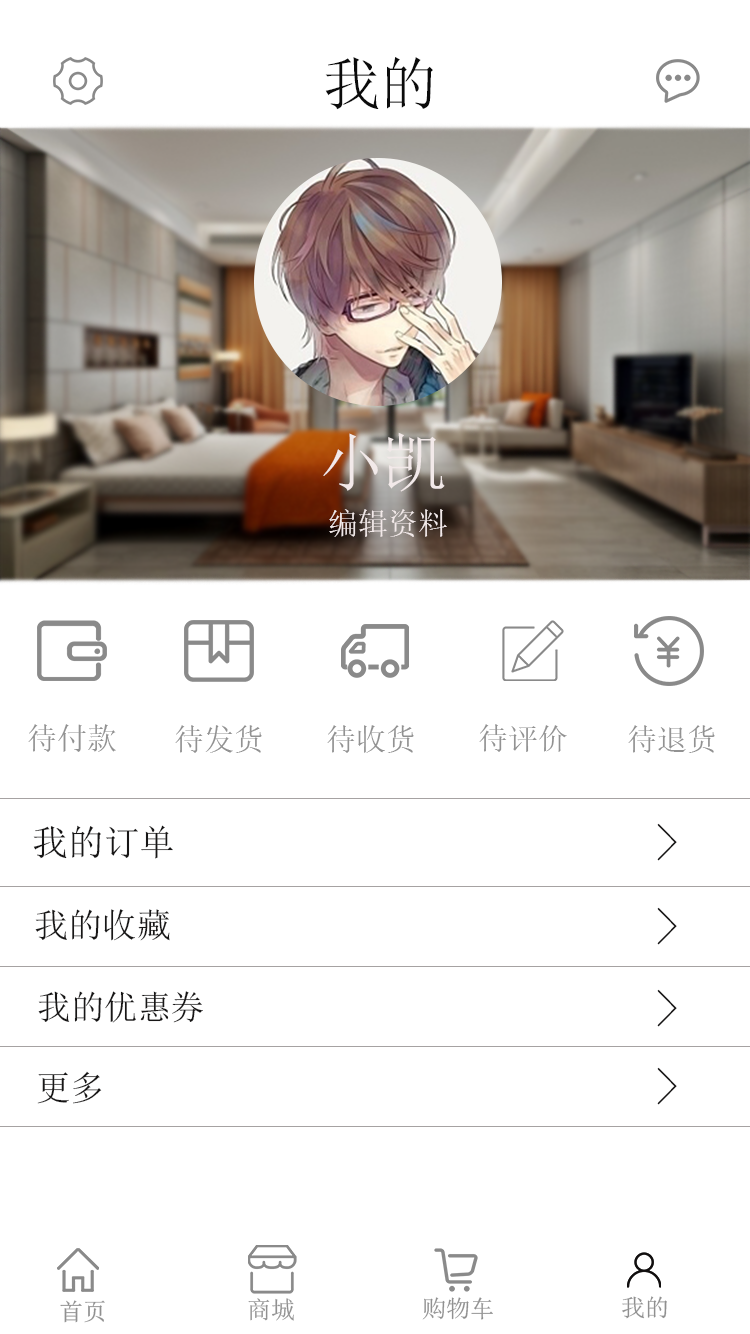
<style>
.page{position:relative;width:750px;height:1334px;background:#ffffff}
.page>*{position:absolute;margin:0}
.t1{font:57.8px "SimSun";color:#0b0b0b}
.t2{font:63.8px "SimSun";color:#f2e9e9}
.t3{font:30px "SimSun";color:#f2e9e9}
.t4{font:30px "SimSun";color:#929292}
.t5{font:35.9px "SimSun";color:#171616}
.t6{font:52.8px "SimSun";color:#171616}
.t7{font:33.9px "SimSun";color:#171616}
.t8{font:34.9px "SimSun";color:#171616}
.t9{font:24px "SimSun";color:#909090}
</style>
<div class="page">
<p class="t1" style="left:325px;top:57px;width:108px;height:53px">我的</p>
<p class="t2" style="left:323px;top:432px;width:122px;height:60px">小凯</p>
<p class="t3" style="left:329px;top:509px;width:118px;height:28px">编辑资料</p>
<p class="t4" style="left:28px;top:724px;width:88px;height:28px">待付款</p>
<p class="t4" style="left:175px;top:725px;width:87px;height:28px">待发货</p>
<p class="t4" style="left:327px;top:725px;width:87px;height:28px">待收货</p>
<p class="t4" style="left:479px;top:724px;width:88px;height:28px">待评价</p>
<p class="t4" style="left:628px;top:725px;width:87px;height:28px">待退货</p>
<p class="t5" style="left:33px;top:825px;width:140px;height:34px">我的订单</p>
<p class="t6" style="left:657px;top:823px;width:20px;height:38px">&gt;</p>
<p class="t7" style="left:35px;top:909px;width:135px;height:32px">我的收藏</p>
<p class="t6" style="left:657px;top:907px;width:20px;height:38px">&gt;</p>
<p class="t6" style="left:657px;top:989px;width:20px;height:38px">&gt;</p>
<p class="t7" style="left:38px;top:991px;width:165px;height:32px">我的优惠券</p>
<p class="t8" style="left:37px;top:1071px;width:65px;height:33px">更多</p>
<p class="t6" style="left:657px;top:1067px;width:20px;height:38px">&gt;</p>
<p class="t9" style="left:60px;top:1300px;width:45px;height:23px">首页</p>
<p class="t9" style="left:248px;top:1298px;width:46px;height:23px">商城</p>
<p class="t9" style="left:422px;top:1297px;width:71px;height:23px">购物车</p>
<p class="t9" style="left:622px;top:1296px;width:45px;height:23px">我的</p>
</div>
